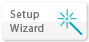
<style>
.page{position:relative;width:89px;height:42px;background:#ffffff}
.page>*{position:absolute;margin:0}
.t1{font:11px/14px "MyriadPro-Regular";letter-spacing:0.04em;color:#737373}
</style>
<div class="page">
<p class="t1" style="left:10px;top:10px;width:34px;height:22px">Setup <br>Wizard</p>
</div>
